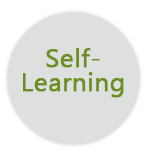
<style>
.page{position:relative;width:150px;height:158px;background:#dee0e0}
.page>*{position:absolute;margin:0}
.t1{font:26px/24px "MicrosoftNewTaiLue";color:#6b8f20;font-weight:bold}
</style>
<div class="page">
<p class="t1" style="left:23px;top:48px;width:101px;height:50px;text-align:center">Self-<br>Learning</p>
</div>
